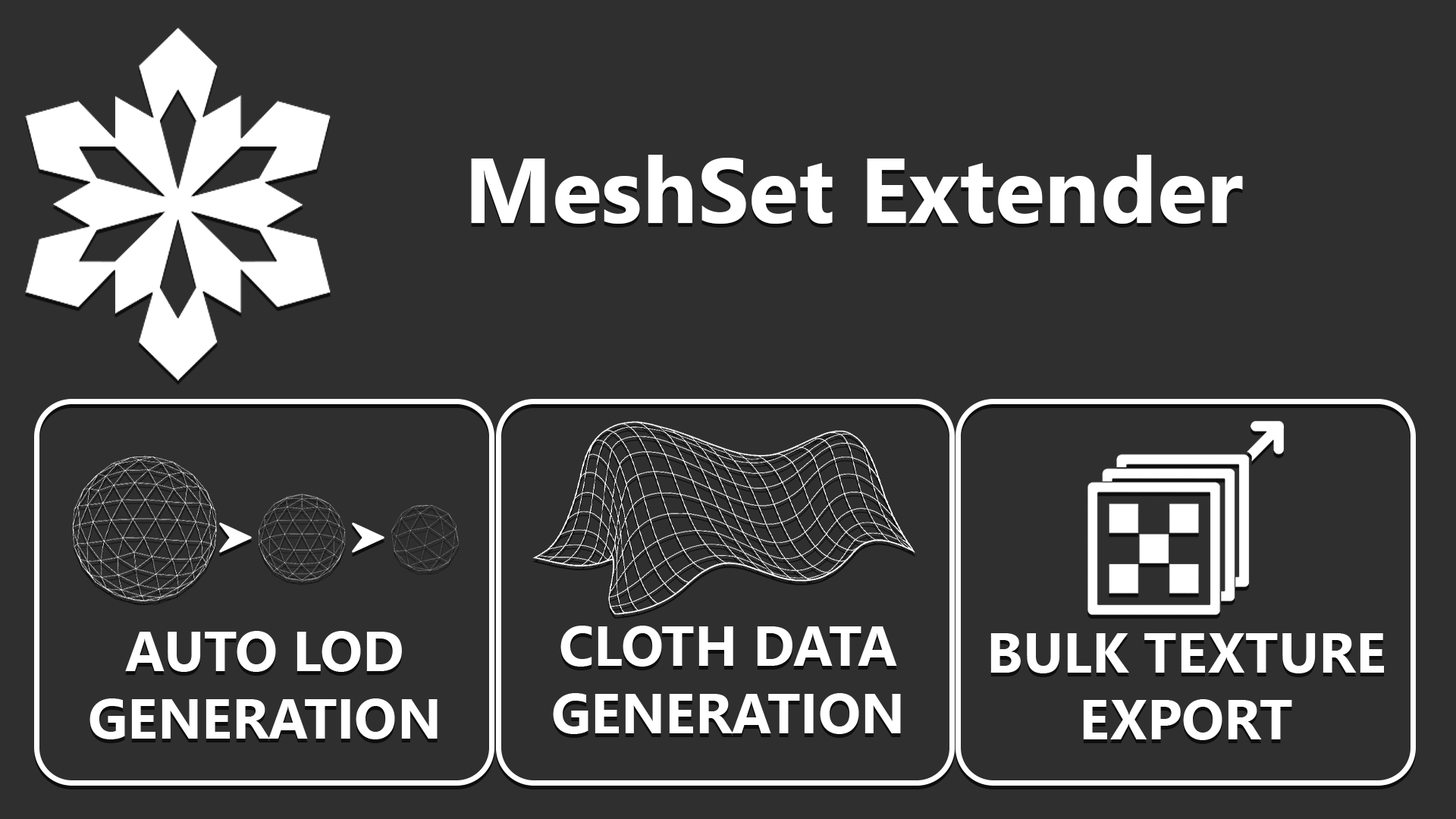
<style>
.page{position:relative;width:1456px;height:819px;background:#2f2f2f}
.page>*{position:absolute;margin:0}
.t1{font:91.9px "SegoeUI-Bold";color:#ffffff}
.t2{font:56.1px "SegoeUI-Bold";color:#ffffff}
</style>
<div class="page">
<p class="t1" style="left:471px;top:155px;width:772px;height:69px">MeshSet Extender</p>
<p class="t2" style="left:553px;top:626px;width:348px;height:108px;text-align:center">CLOTH DATA<br>GENERATION</p>
<p class="t2" style="left:89px;top:631px;width:349px;height:108px;text-align:center">AUTO LOD<br>GENERATION</p>
<p class="t2" style="left:990px;top:633px;width:394px;height:107px;text-align:center">BULK TEXTURE<br>EXPORT</p>
</div>
